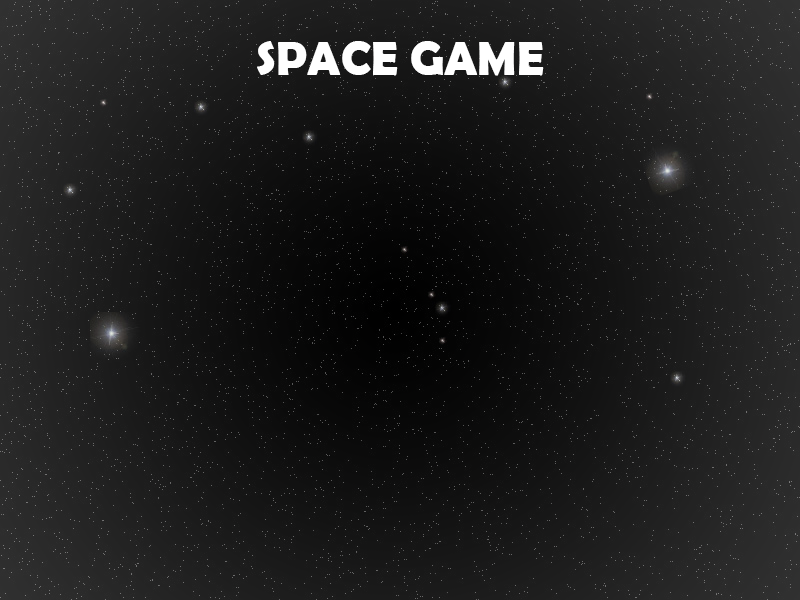
<style>
.page{position:relative;width:800px;height:600px}
.page>*{position:absolute;margin:0}
.t1{font:48px "BerlinSansFBDemi-Bold";color:#ffffff}
</style>
<div class="page">
<p class="t1" style="left:257px;top:41px;width:287px;height:35px">SPACE GAME</p>
</div>
